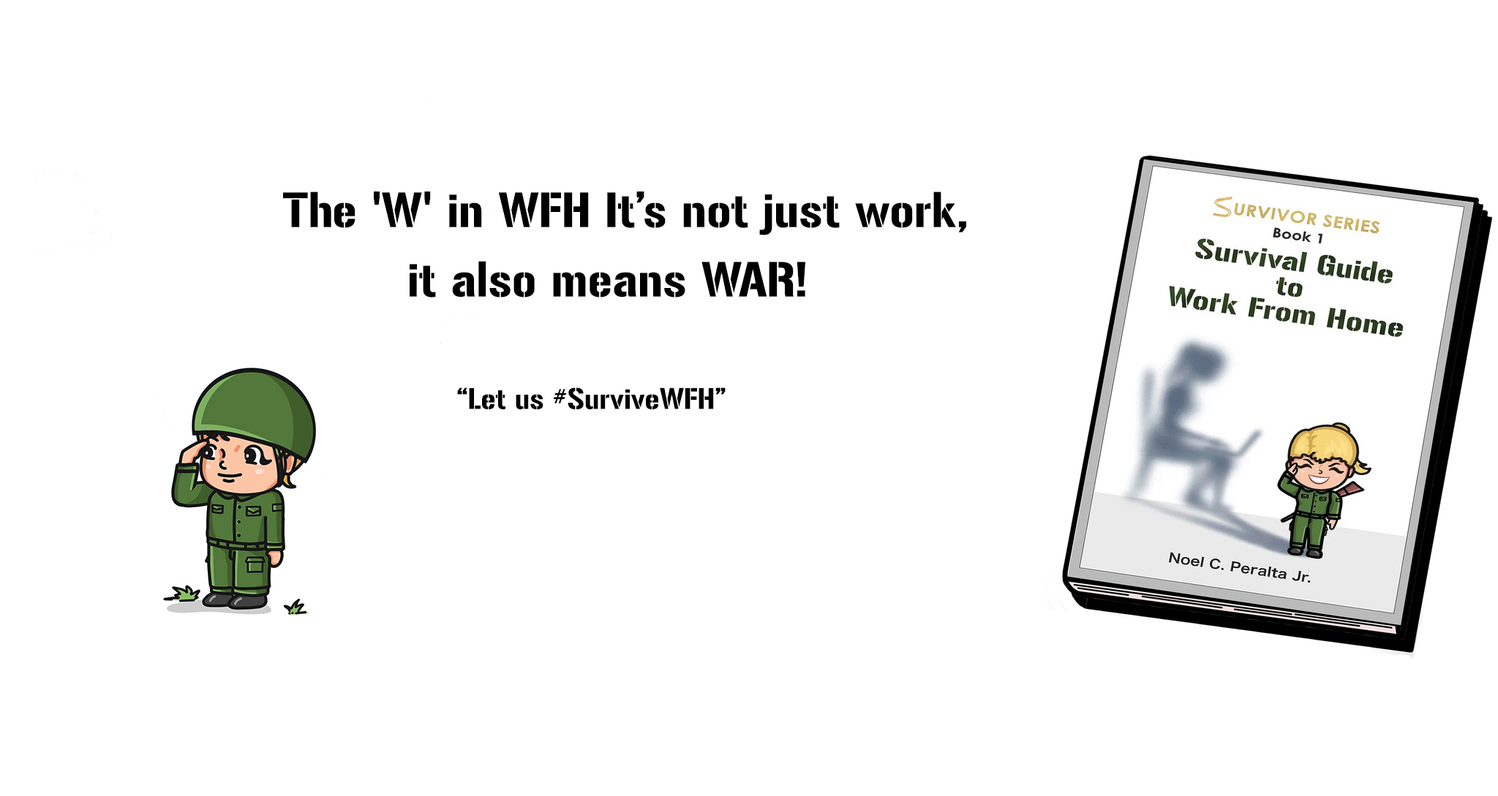
<style>
.page{position:relative;width:1498px;height:796px;background:#ffffff}
.page>*{position:absolute;margin:0}
.t1{font:43.9px "Gunplay-Regular";color:#000000}
.t2{font:26.3px "Gunplay-Regular";color:#000000}
</style>
<div class="page">
<p class="t1" style="left:283px;top:192px;width:683px;height:43px">The 'W' in WFH It’s not just work,</p>
<p class="t1" style="left:409px;top:261px;width:396px;height:37px">it also means WAR!</p>
<p class="t2" style="left:457px;top:388px;width:268px;height:21px">“Let us #SurviveWFH”</p>
</div>
